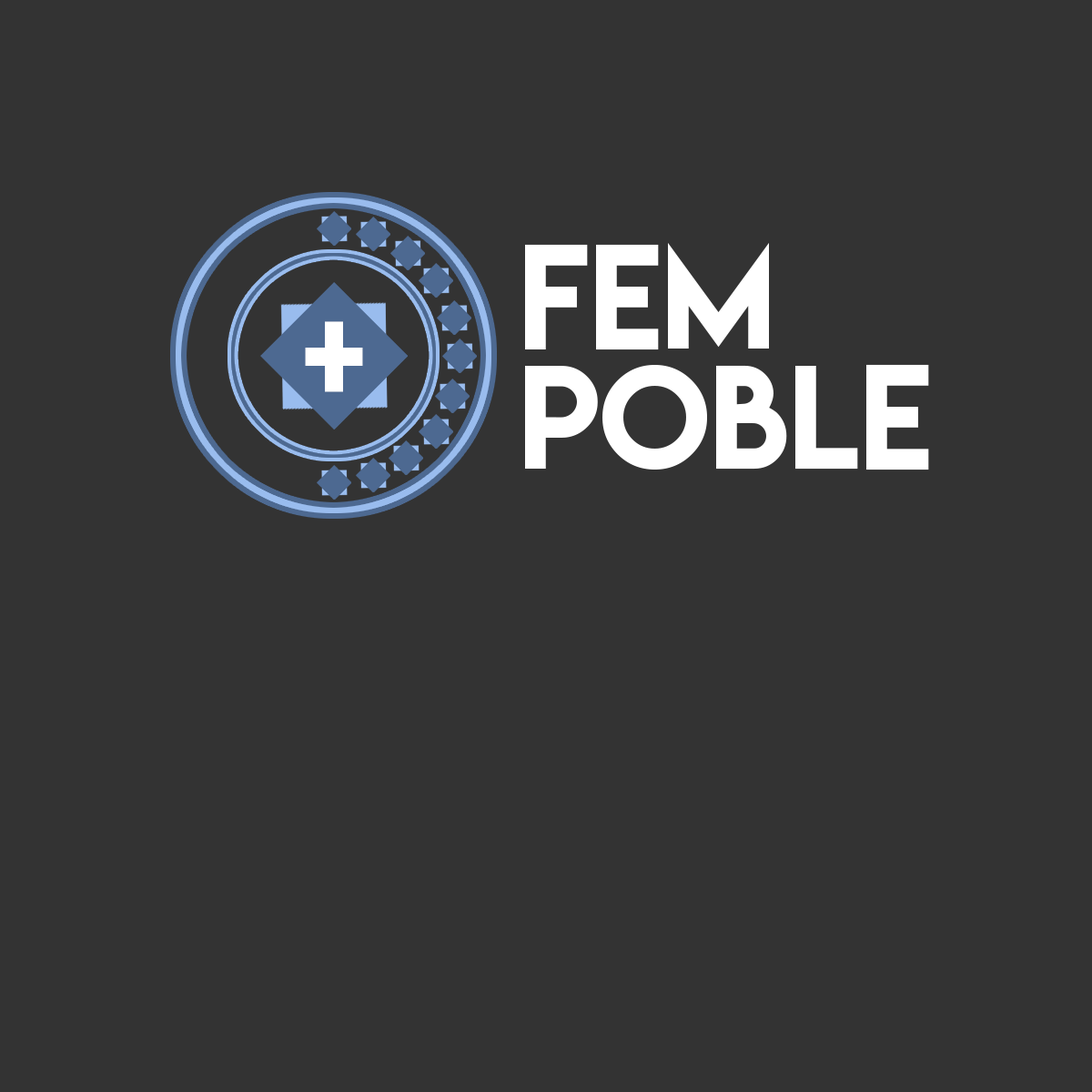
<style>
.page{position:relative;width:1092px;height:1092px;background:#333333}
.page>*{position:absolute;margin:0}
.t1{font:131px "LemonMilk";color:#ffffff}
</style>
<div class="page">
<p class="t1" style="left:525px;top:242px;width:244px;height:108px">FEM</p>
<p class="t1" style="left:305px;top:321px;width:58px;height:71px">+</p>
<p class="t1" style="left:525px;top:364px;width:404px;height:106px">POBLE</p>
</div>
